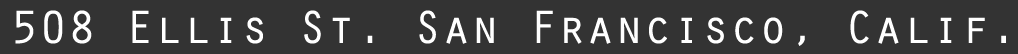
<style>
.page{position:relative;width:1018px;height:54px;background:#333333}
.page>*{position:absolute;margin:0}
.t1{font:48px "OratorStd";color:#ffffff}
</style>
<div class="page">
<p class="t1" style="left:15px;top:10px;width:991px;height:36px">508 Ellis St. San Francisco, Calif.</p>
</div>
